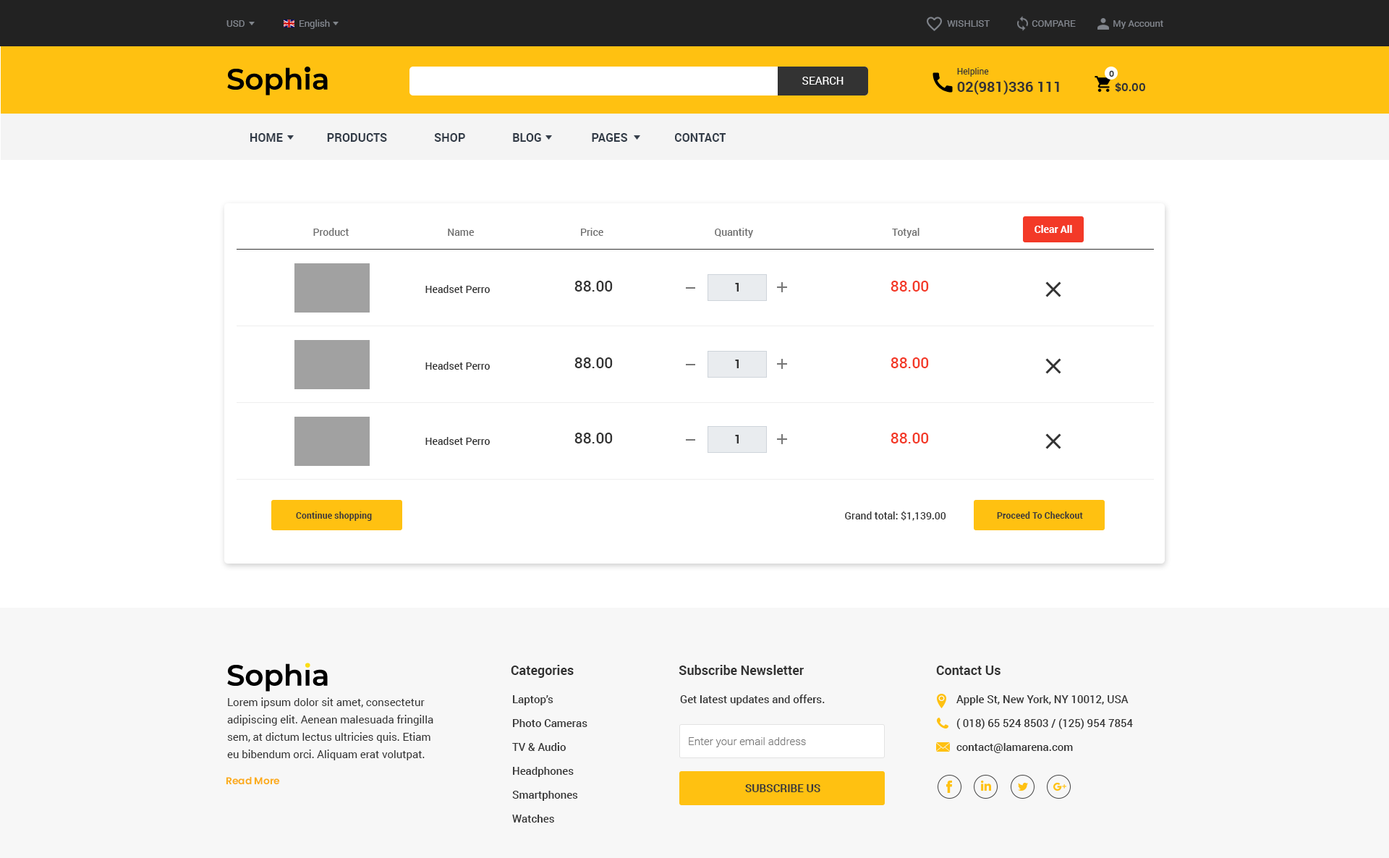
<style>
.page{position:relative;width:1389px;height:858px;background:#ffffff}
.page>*{position:absolute;margin:0}
.t1{font:9.4px "Roboto-Regular";color:#81858c}
.t2{font:10.9px "Roboto-Regular";color:#ffffff}
.t3{font:14.5px "Roboto-Bold";color:#333333}
.t4{font:8.7px "Roboto-Regular";color:#333333}
.t5{font:8px "Poppins-SemiBold";color:#333333}
.t6{font:10.9px "Poppins-SemiBold";color:#333333}
.t7{font:11.6px "Roboto-Bold";color:#333c48}
.t8{font:10.1px "Roboto-Medium";color:#6f6f6f}
.t9{font:10.1px "Roboto-Bold";color:#fefefe}
.t10{font:15.2px "Roboto-Medium";color:#333333}
.t11{font:15.2px "Roboto-Medium";color:#f33927}
.t12{font:10.1px "Roboto-Medium";color:#333333}
.t13{font:11.6px "Roboto-Bold";color:#333333}
.t14{font:8.7px "Roboto-Bold";color:#383838;scale:1.03 1}
.t15{font:13px "Roboto-Bold";color:#333333}
.t16{font:10.9px/17.4px "Roboto-Regular";color:#333333}
.t17{font:10.9px/23.9px "Roboto-Medium";color:#333333}
.t18{font:10.9px "Roboto-Medium";color:#333333}
.t19{font:10.9px "Roboto-Light";color:#777777}
.t20{font:9.8px "Poppins-SemiBold";color:#fbad1a}
.t21{font:10.9px "Roboto-Bold";color:#383838}
</style>
<div class="page">
<p class="t1" style="left:227px;top:20px;width:18px;height:7px">USD</p>
<p class="t1" style="left:300px;top:20px;width:30px;height:9px">English</p>
<p class="t1" style="left:947px;top:20px;width:217px;height:9px">WISHLIST                  COMPARE                My Account</p>
<p class="t2" style="left:803px;top:77px;width:41px;height:8px">SEARCH</p>
<p class="t3" style="left:957px;top:67px;width:102px;height:28px"><span class="t4">Helpline<br></span>02(981)336 111</p>
<p class="t5" style="left:1109px;top:70px;width:5px;height:7px">0</p>
<p class="t6" style="left:1115px;top:82px;width:31px;height:11px">$0.00</p>
<p class="t7" style="left:250px;top:133px;width:477px;height:9px">HOME               PRODUCTS                SHOP                BLOG                 PAGES                CONTACT</p>
<p class="t8" style="left:313px;top:228px;width:607px;height:10px">Product                                       Name                                          Price                                            Quantity                                                       Totyal</p>
<p class="t9" style="left:1035px;top:225px;width:37px;height:8px">Clear All</p>
<p class="t10" style="left:575px;top:281px;width:38px;height:11px">88.00</p>
<p class="t11" style="left:891px;top:281px;width:38px;height:11px">88.00</p>
<p class="t8" style="left:426px;top:285px;width:64px;height:8px;text-align:center"><span class="t12">Headset Perro<br></span>class="product-name"&gt;Headset Perro&lt;/a&gt;</p>
<p class="t13" style="left:735px;top:283px;width:4px;height:9px">1</p>
<p class="t8" style="left:426px;top:362px;width:64px;height:8px;text-align:center"><span class="t12">Headset Perro<br></span>class="product-name"&gt;Headset Perro&lt;/a&gt;</p>
<p class="t10" style="left:575px;top:357px;width:38px;height:11px">88.00</p>
<p class="t13" style="left:735px;top:360px;width:4px;height:8px">1</p>
<p class="t11" style="left:891px;top:357px;width:38px;height:11px">88.00</p>
<p class="t8" style="left:426px;top:437px;width:64px;height:8px;text-align:center"><span class="t12">Headset Perro<br></span>class="product-name"&gt;Headset Perro&lt;/a&gt;</p>
<p class="t10" style="left:575px;top:433px;width:38px;height:11px">88.00</p>
<p class="t13" style="left:735px;top:435px;width:4px;height:9px">1</p>
<p class="t11" style="left:891px;top:433px;width:38px;height:11px">88.00</p>
<p class="t14" style="left:296px;top:512px;width:76px;height:9px">Continue shopping</p>
<p class="t12" style="left:845px;top:511px;width:102px;height:10px">Grand total: $1,139.00</p>
<p class="t14" style="left:997px;top:512px;width:86px;height:7px">Proceed To Checkout</p>
<p class="t15" style="left:511px;top:665px;width:63px;height:13px">Categories</p>
<p class="t15" style="left:679px;top:665px;width:125px;height:10px">Subscribe Newsletter</p>
<p class="t15" style="left:936px;top:666px;width:65px;height:9px">Contact Us</p>
<p class="t16" style="left:227px;top:698px;width:206px;height:63px">Lorem ipsum dolor sit amet, consectetur adipiscing elit. Aenean malesuada fringilla sem, at dictum lectus ultricies quis. Etiam eu bibendum orci. Aliquam erat volutpat.</p>
<p class="t17" style="left:512px;top:695px;width:76px;height:128px">Laptop’s<br>Photo Cameras<br>TV &amp; Audio<br>Headphones<br>Smartphones<br>Watches</p>
<p class="t18" style="left:680px;top:695px;width:145px;height:11px">Get latest updates and offers.</p>
<p class="t17" style="left:957px;top:695px;width:176px;height:58px">Apple St, New York, NY 10012, USA<br>( 018) 65 524 8503 / (125) 954 7854<br>contact@lamarena.com</p>
<p class="t19" style="left:689px;top:737px;width:117px;height:11px">Enter your email address</p>
<p class="t20" style="left:226px;top:776px;width:54px;height:9px">Read More</p>
<p class="t21" style="left:745px;top:784px;width:76px;height:8px">SUBSCRIBE US</p>
</div>
